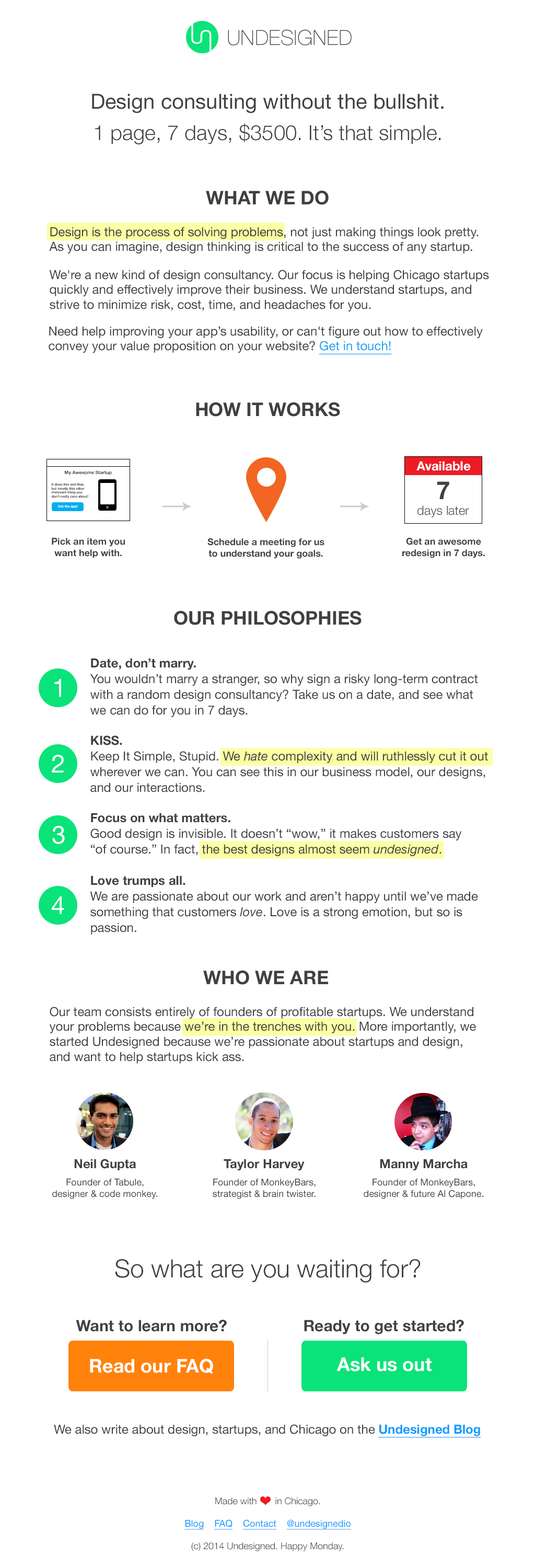
<style>
.page{position:relative;width:535px;height:1568px;background:#ffffff}
.page>*{position:absolute;margin:0}
.t1{font:20.9px "HelveticaNeue-Thin";color:#404040}
.t2{font:20.9px/31.4px "HelveticaNeue-Light";color:#404040}
.t3{font:20.9px/31.4px "HelveticaNeue";color:#404040}
.t4{font:18.8px "HelveticaNeue-Bold";color:#404040}
.t5{font:12.5px "HelveticaNeue";color:#404040}
.t6{font:12.5px "HelveticaNeue";color:#10a0f2;text-decoration:underline}
.t7{font:12.5px "HelveticaNeue-Bold";color:#ffffff}
.t8{font:4.6px "HelveticaNeue-Bold";color:#404040}
.t9{font:3.4px "HelveticaNeue-Bold";color:#404040}
.t10{font:25.1px "HelveticaNeue-Bold";color:#404040}
.t11{font:3.4px "HelveticaNeue-Bold";color:#ffffff}
.t12{font:12.5px "HelveticaNeue-Light";color:#404040}
.t13{font:9.4px "HelveticaNeue-Bold";color:#404040}
.t14{font:12.5px/15.7px "HelveticaNeue";color:#404040}
.t15{font:12.5px/15.7px "HelveticaNeue-Bold";color:#404040}
.t16{font:25.1px "HelveticaNeue";color:#ffffff}
.t17{font:12.5px/15.7px "HelveticaNeue-Italic";color:#404040}
.t18{font:12.5px "HelveticaNeue-Bold";color:#404040}
.t19{font:9.4px "HelveticaNeue";color:#404040}
.t20{font:25.1px "HelveticaNeue-Light";color:#404040}
.t21{font:15.7px "HelveticaNeue-Bold";color:#404040}
.t22{font:18.8px "HelveticaNeue-Bold";color:#ffffff}
.t23{font:12.5px "HelveticaNeue-Bold";color:#009cff;text-decoration:underline}
.t24{font:9.4px "HelveticaNeue";color:#0096ff;text-decoration:underline}
.t25{font:9.4px "HelveticaNeue-Light";color:#404040}
</style>
<div class="page">
<p class="t1" style="left:228px;top:29px;width:124px;height:16px">UNDESIGNED</p>
<p class="t2" style="left:92px;top:94px;width:352px;height:51px;text-align:center"><span class="t3">Design consulting without the bullshit.<br></span>1 page, 7 days, $3500. It’s that simple.</p>
<p class="t4" style="left:206px;top:190px;width:123px;height:15px">WHAT WE DO</p>
<p class="t5" style="left:49px;top:227px;width:430px;height:26px">Design is the process of solving problems, not just making things look pretty.<br>As you can imagine, design thinking is critical to the success of any startup.</p>
<p class="t5" style="left:49px;top:270px;width:440px;height:42px">We're a new kind of design consultancy. Our focus is helping Chicago startups<br>quickly and effectively improve their business. We understand startups, and<br>strive to minimize risk, cost, time, and headaches for you.</p>
<p class="t5" style="left:49px;top:326px;width:434px;height:28px">Need help improving your app’s usability, or can't figure out how to effectively<br>convey your value proposition on your website? <span class="t6">Get in touch!</span></p>
<p class="t4" style="left:196px;top:402px;width:144px;height:15px">HOW IT WORKS</p>
<p class="t7" style="left:417px;top:461px;width:54px;height:10px">Available</p>
<p class="t8" style="left:65px;top:470px;width:47px;height:5px">My Awesome Startup</p>
<p class="t9" style="left:51px;top:483px;width:37px;height:16px">It does this and that,<br>but mostly this other<br>irrelevant thing you<br>don’t really care about!</p>
<p class="t10" style="left:437px;top:481px;width:12px;height:18px">7</p>
<p class="t11" style="left:58px;top:505px;width:20px;height:4px">Get the app!</p>
<p class="t12" style="left:418px;top:505px;width:51px;height:12px">days later</p>
<p class="t13" style="left:52px;top:538px;width:73px;height:20px;text-align:center">Pick an item you<br>want help with.</p>
<p class="t13" style="left:207px;top:538px;width:118px;height:21px;text-align:center">Schedule a meeting for us<br>to understand your goals.</p>
<p class="t13" style="left:402px;top:537px;width:83px;height:21px;text-align:center">Get an awesome<br>redesign in 7 days.</p>
<p class="t4" style="left:174px;top:610px;width:188px;height:15px">OUR PHILOSOPHIES</p>
<p class="t14" style="left:90px;top:658px;width:388px;height:59px"><span class="t15">Date, don’t marry.<br></span>You wouldn’t marry a stranger, so why sign a risky long-term contract<br>with a random design consultancy? Take us on a date, and see what<br>we can do for you in 7 days.</p>
<p class="t16" style="left:54px;top:679px;width:7px;height:18px">1</p>
<p class="t14" style="left:90px;top:735px;width:398px;height:57px"><span class="t15">KISS.<br></span>Keep It Simple, Stupid. We <span class="t17">hate </span>complexity and will ruthlessly cut it out<br>wherever we can. You can see this in our business model, our designs,<br>and our interactions.</p>
<p class="t16" style="left:52px;top:755px;width:12px;height:18px">2</p>
<p class="t14" style="left:90px;top:813px;width:372px;height:43px"><span class="t15">Focus on what matters.<br></span>Good design is invisible. It doesn’t “wow,” it makes customers say <br>“of course.” In fact, the best designs almost seem <span class="t17">undesigned</span>.</p>
<p class="t16" style="left:52px;top:826px;width:13px;height:18px">3</p>
<p class="t14" style="left:90px;top:875px;width:388px;height:60px"><span class="t15">Love trumps all.<br></span>We are passionate about our work and aren’t happy until we’ve made<br>something that customers <span class="t17">love</span>. Love is a strong emotion, but so is<br>passion.</p>
<p class="t16" style="left:52px;top:896px;width:12px;height:18px">4</p>
<p class="t4" style="left:203px;top:970px;width:125px;height:15px">WHO WE ARE</p>
<p class="t5" style="left:49px;top:1007px;width:427px;height:57px">Our team consists entirely of founders of profitable startups. We understand<br>your problems because we’re in the trenches with you. More importantly, we<br>started Undesigned because we’re passionate about startups and design,<br>and want to help startups kick ass.</p>
<p class="t18" style="left:74px;top:1159px;width:62px;height:12px">Neil Gupta</p>
<p class="t18" style="left:224px;top:1159px;width:81px;height:12px">Taylor Harvey</p>
<p class="t18" style="left:380px;top:1159px;width:88px;height:12px">Manny Marcha</p>
<p class="t19" style="left:52px;top:1179px;width:106px;height:20px;text-align:center">Founder of Tabule,<br>designer &amp; code monkey.</p>
<p class="t19" style="left:213px;top:1179px;width:103px;height:20px;text-align:center">Founder of MonkeyBars,<br>strategist &amp; brain twister.</p>
<p class="t19" style="left:364px;top:1179px;width:119px;height:20px;text-align:center">Founder of MonkeyBars,<br>designer &amp; future Al Capone.</p>
<p class="t20" style="left:115px;top:1259px;width:306px;height:24px">So what are you waiting for?</p>
<p class="t21" style="left:76px;top:1320px;width:151px;height:12px">Want to learn more?</p>
<p class="t21" style="left:304px;top:1320px;width:160px;height:14px">Ready to get started?</p>
<p class="t22" style="left:90px;top:1358px;width:123px;height:16px">Read our FAQ</p>
<p class="t22" style="left:337px;top:1357px;width:95px;height:14px">Ask us out</p>
<p class="t5" style="left:54px;top:1424px;width:427px;height:14px">We also write about design, startups, and Chicago on the <span class="t23">Undesigned Blog</span></p>
<p class="t24" style="left:185px;top:1497px;width:166px;height:54px;text-align:center"><span class="t25">Made with       in Chicago.<br><br></span>Blog    FAQ    Contact    @undesignedio<br><span class="t25"><br>(c) 2014 Undesigned. Happy Monday.</span></p>
</div>
